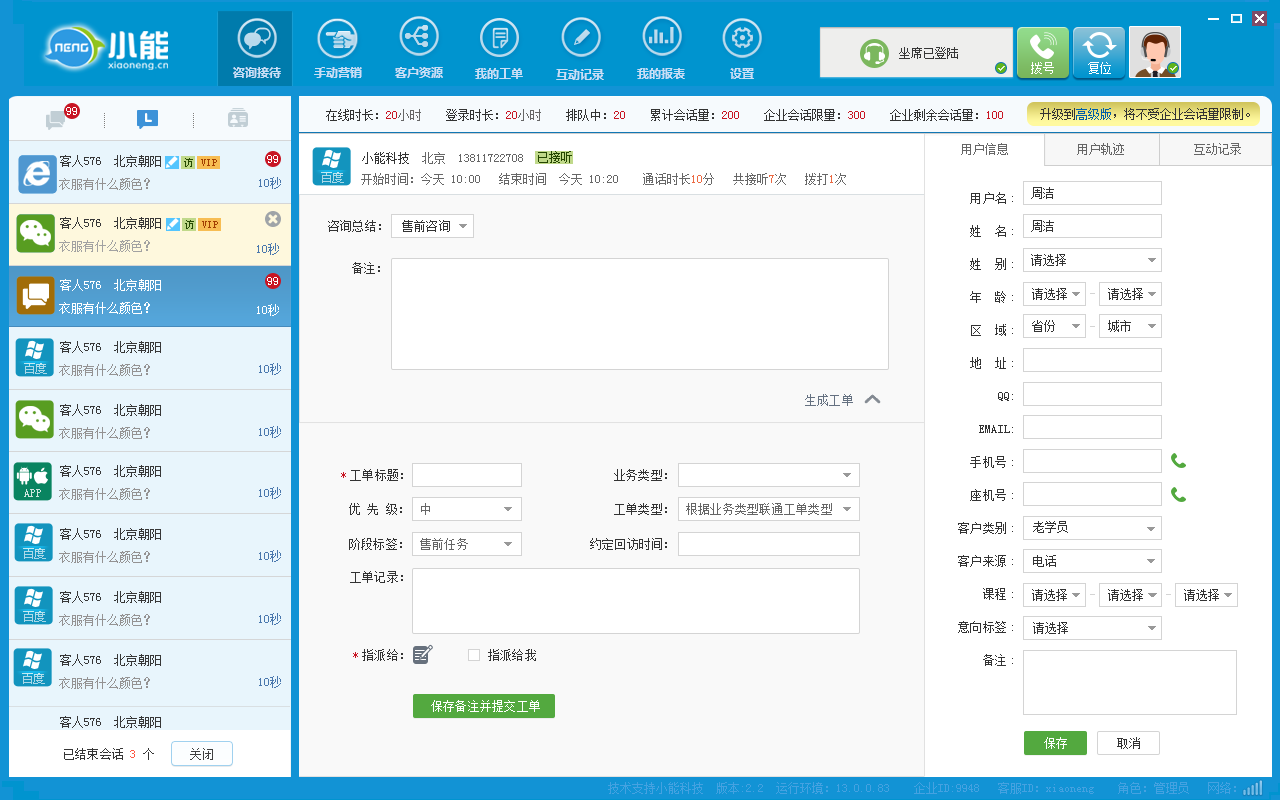
<style>
.page{position:relative;width:1280px;height:800px;background:#ffffff}
.page>*{position:absolute;margin:0}
.t1{font:12px "SimSun";color:#ffffff}
.t2{font:12px "SimSun";color:#333333}
.t3{font:12px "SimSun";color:#c81623}
.t4{font:12px "SimSun";color:#676767}
.t5{font:12px "SimSun";color:#005ea7}
.t6{font:12px "SimSun";color:#666666}
.t7{font:12px "SimSun";color:#244600}
.t8{font:12px "SimSun";color:#ec6941}
.t9{font:12px/33px "NSimSun";letter-spacing:0.02em;color:#333333}
.t10{font:12px "NSimSun";letter-spacing:0.02em;color:#333333}
.t11{font:12px "NSimSun";letter-spacing:0.02em;color:#657181}
.t12{font:12px "NSimSun";letter-spacing:0.02em;color:#c81623}
.t13{font:12px "NSimSun";letter-spacing:0.02em;color:#666666}
.t14{font:12px "NSimSun";letter-spacing:0.02em;color:#ffffff}
.t15{font:12px "SimSun";color:#56aee2}
</style>
<div class="page">
<p class="t1" style="left:66px;top:107px;width:11px;height:8px">99</p>
<p class="t2" style="left:326px;top:109px;width:677px;height:12px">在线时长：<span class="t3">20</span><span class="t4">小时    </span>登录时长：<span class="t3">20</span><span class="t4">小时    </span>排队中：<span class="t3">20    </span>累计会话量：<span class="t3">200</span>    企业会话限量：<span class="t3">300</span>    企业剩余会话量：<span class="t3">100</span></p>
<p class="t2" style="left:1040px;top:108px;width:210px;height:12px">升级到<span class="t5">高级版</span>，将不受企业会话量限制。</p>
<p class="t6" style="left:961px;top:143px;width:47px;height:12px">用户信息</p>
<p class="t6" style="left:1077px;top:143px;width:47px;height:12px">用户轨迹</p>
<p class="t6" style="left:1194px;top:143px;width:47px;height:12px">互动记录</p>
<p class="t6" style="left:362px;top:152px;width:161px;height:12px"><span class="t2">小能科技  </span>北京  13811722708</p>
<p class="t7" style="left:538px;top:151px;width:34px;height:12px">已接听</p>
<p class="t4" style="left:361px;top:173px;width:485px;height:12px">开始时间：今天 10:00   结束时间  今天 10:20    通话时长<span class="t8">10</span>分   共接听<span class="t8">7</span>次   拨打<span class="t8">1</span>次</p>
<p class="t9" style="left:958px;top:192px;width:55px;height:474px;text-align:right">用户名:<br>姓　名:<br>姓　别:<br>年　龄:<br>区  域:<br>地  址:<br> QQ:<br>EMAIL:<br>手机号:<br>座机号:<br>客户类别:<br>客户来源:<br>课程:<br>意向标签:<br>备注:</p>
<p class="t2" style="left:1031px;top:187px;width:23px;height:12px">周洁</p>
<p class="t10" style="left:328px;top:220px;width:53px;height:12px">咨询总结：</p>
<p class="t10" style="left:402px;top:220px;width:48px;height:12px">售前咨询</p>
<p class="t2" style="left:1031px;top:220px;width:23px;height:12px">周洁</p>
<p class="t2" style="left:1031px;top:254px;width:35px;height:12px">请选择</p>
<p class="t10" style="left:352px;top:262px;width:28px;height:12px">备注：</p>
<p class="t2" style="left:1032px;top:288px;width:35px;height:12px">请选择</p>
<p class="t2" style="left:1108px;top:288px;width:35px;height:12px">请选择</p>
<p class="t2" style="left:1032px;top:320px;width:23px;height:12px">省份</p>
<p class="t2" style="left:1108px;top:320px;width:23px;height:12px">城市</p>
<p class="t11" style="left:805px;top:394px;width:48px;height:12px">生成工单</p>
<p class="t10" style="left:341px;top:469px;width:62px;height:12px"><span class="t12">*</span>工单标题：</p>
<p class="t10" style="left:614px;top:469px;width:53px;height:12px">业务类型：</p>
<p class="t10" style="left:349px;top:503px;width:53px;height:12px">优 先 级：</p>
<p class="t13" style="left:421px;top:503px;width:9px;height:12px">中</p>
<p class="t10" style="left:614px;top:503px;width:53px;height:12px">工单类型：</p>
<p class="t13" style="left:686px;top:503px;width:146px;height:12px">根据业务类型联通工单类型</p>
<p class="t2" style="left:1033px;top:521px;width:35px;height:12px">老学员</p>
<p class="t10" style="left:349px;top:538px;width:53px;height:12px">阶段标签：</p>
<p class="t13" style="left:420px;top:538px;width:48px;height:12px">售前任务</p>
<p class="t10" style="left:590px;top:538px;width:77px;height:12px">约定回访时间：</p>
<p class="t2" style="left:1033px;top:555px;width:23px;height:12px">电话</p>
<p class="t10" style="left:350px;top:571px;width:53px;height:12px">工单记录：</p>
<p class="t2" style="left:1032px;top:589px;width:35px;height:12px">请选择</p>
<p class="t2" style="left:1108px;top:589px;width:35px;height:12px">请选择</p>
<p class="t2" style="left:1184px;top:589px;width:35px;height:12px">请选择</p>
<p class="t10" style="left:1033px;top:622px;width:35px;height:12px">请选择</p>
<p class="t10" style="left:353px;top:649px;width:50px;height:12px"><span class="t12">*</span>指派给：</p>
<p class="t10" style="left:488px;top:649px;width:48px;height:12px">指派给我</p>
<p class="t14" style="left:431px;top:700px;width:109px;height:12px">保存备注并提交工单</p>
<p class="t14" style="left:1044px;top:737px;width:23px;height:12px">保存</p>
<p class="t10" style="left:1117px;top:737px;width:23px;height:12px">取消</p>
<p class="t15" style="left:608px;top:782px;width:628px;height:12px">技术支持小能科技  版本:2.2  运行环境：13.0.0.83    企业ID:9948   客服ID：xiaoneng    角色：管理员   网络：</p>
</div>
